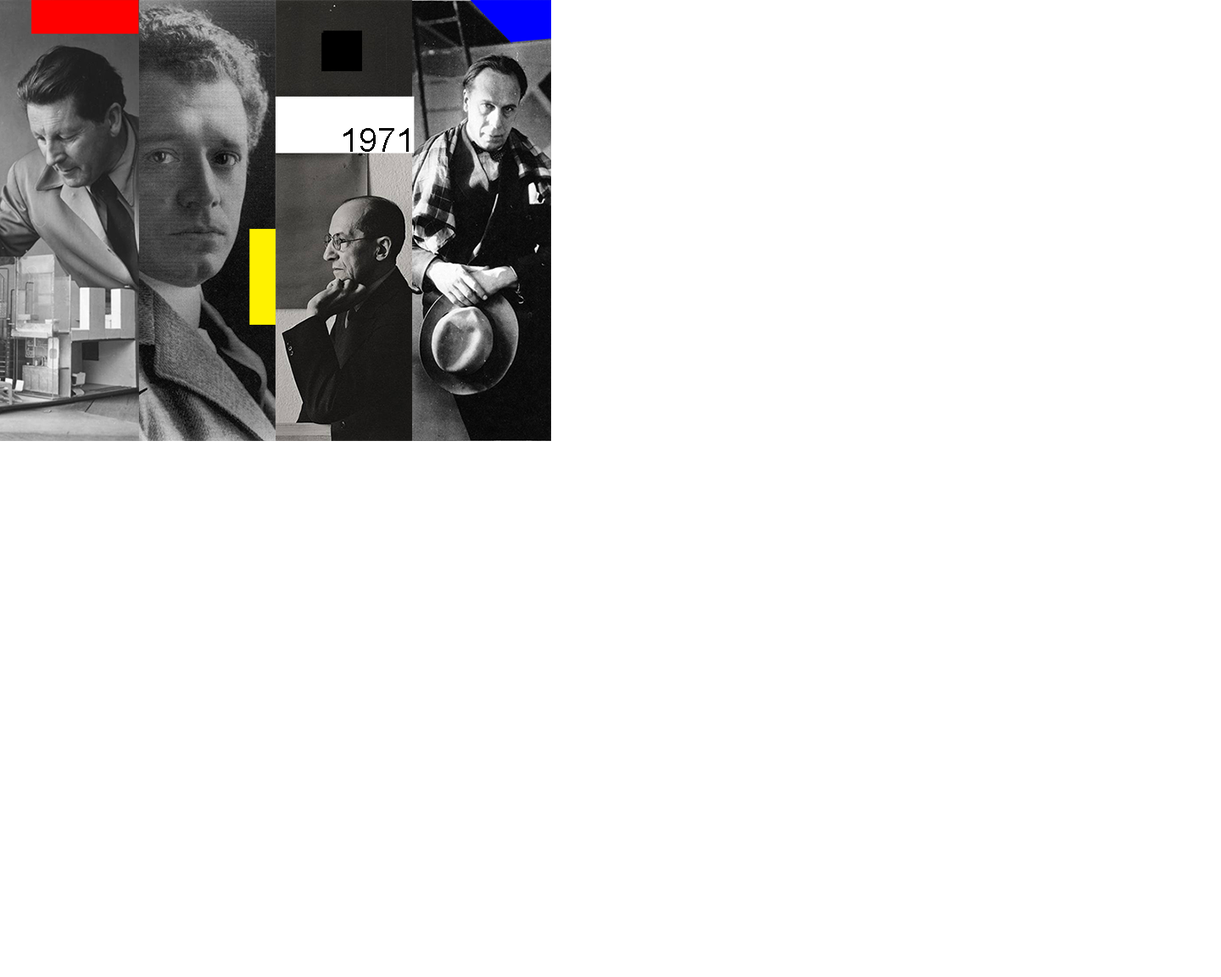
<style>
.page{position:relative;width:1221px;height:977px;background:#ffffff}
.page>*{position:absolute;margin:0}
.t1{font:33.4px "ArialMT";color:#000000}
</style>
<div class="page">
<p class="t1" style="left:343px;top:128px;width:66px;height:24px">1971</p>
</div>
